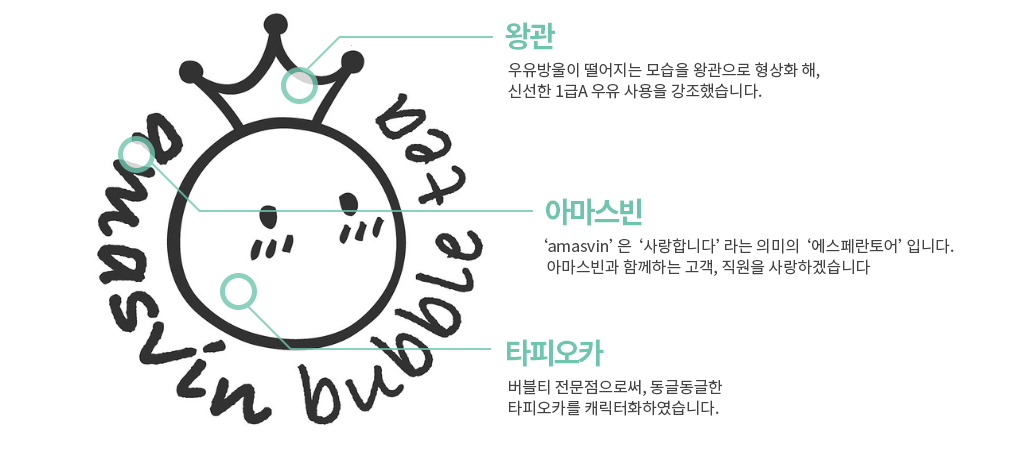
<style>
.page{position:relative;width:1020px;height:468px;background:#ffffff}
.page>*{position:absolute;margin:0}
.t1{font:29.3px "NotoSansCJKtc-Bold";letter-spacing:-0.09em;color:#6dc6ad}
.t2{font:16px/21.1px "NotoSansCJKtc-Regular";letter-spacing:-0.01em;color:#434343}
</style>
<div class="page">
<p class="t1" style="left:505px;top:22px;width:50px;height:28px">왕관</p>
<p class="t2" style="left:508px;top:62px;width:312px;height:37px">우유방울이 떨어지는 모습을 왕관으로 형상화 해,<br>신선한 1급A 우유 사용을 강조했습니다.</p>
<p class="t1" style="left:546px;top:198px;width:96px;height:28px">아마스빈</p>
<p class="t2" style="left:544px;top:238px;width:410px;height:38px">‘amasvin’은 ‘사랑합니다’라는 의미의 ‘에스페란토어’입니다.<br>  아마스빈과 함께하는 고객, 직원을 사랑하겠습니다</p>
<p class="t1" style="left:507px;top:339px;width:97px;height:28px">타피오카</p>
<p class="t2" style="left:509px;top:379px;width:214px;height:37px">버블티 전문점으로써, 동글동글한<br>타피오카를 캐릭터화하였습니다.</p>
</div>
